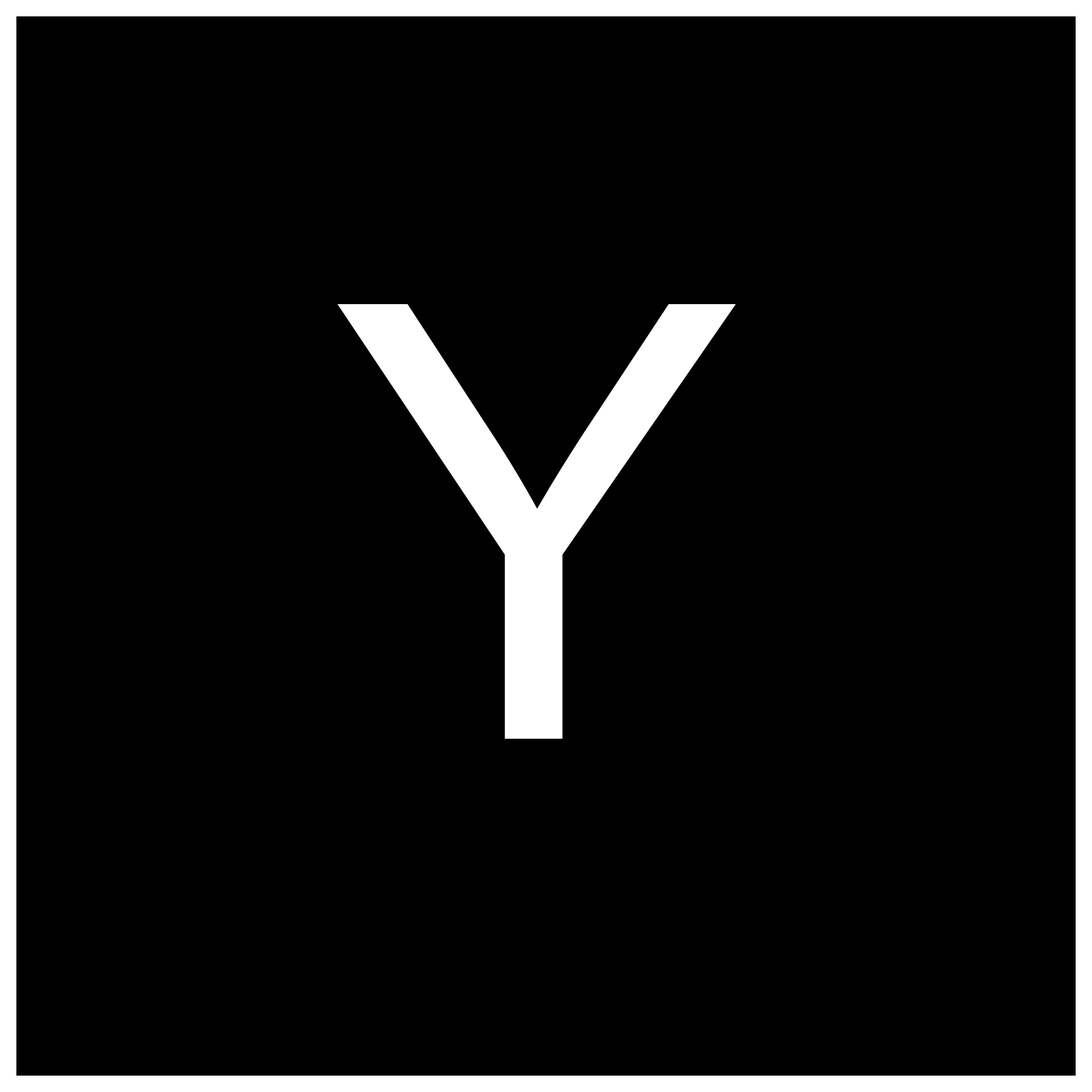
<style>
.page{position:relative;width:1092px;height:1092px;background:#000000}
.page>*{position:absolute;margin:0}
.t1{font:606.7px "ArialMT";color:#ffffff}
</style>
<div class="page">
<p class="t1" style="left:337px;top:304px;width:399px;height:435px">Y</p>
</div>
